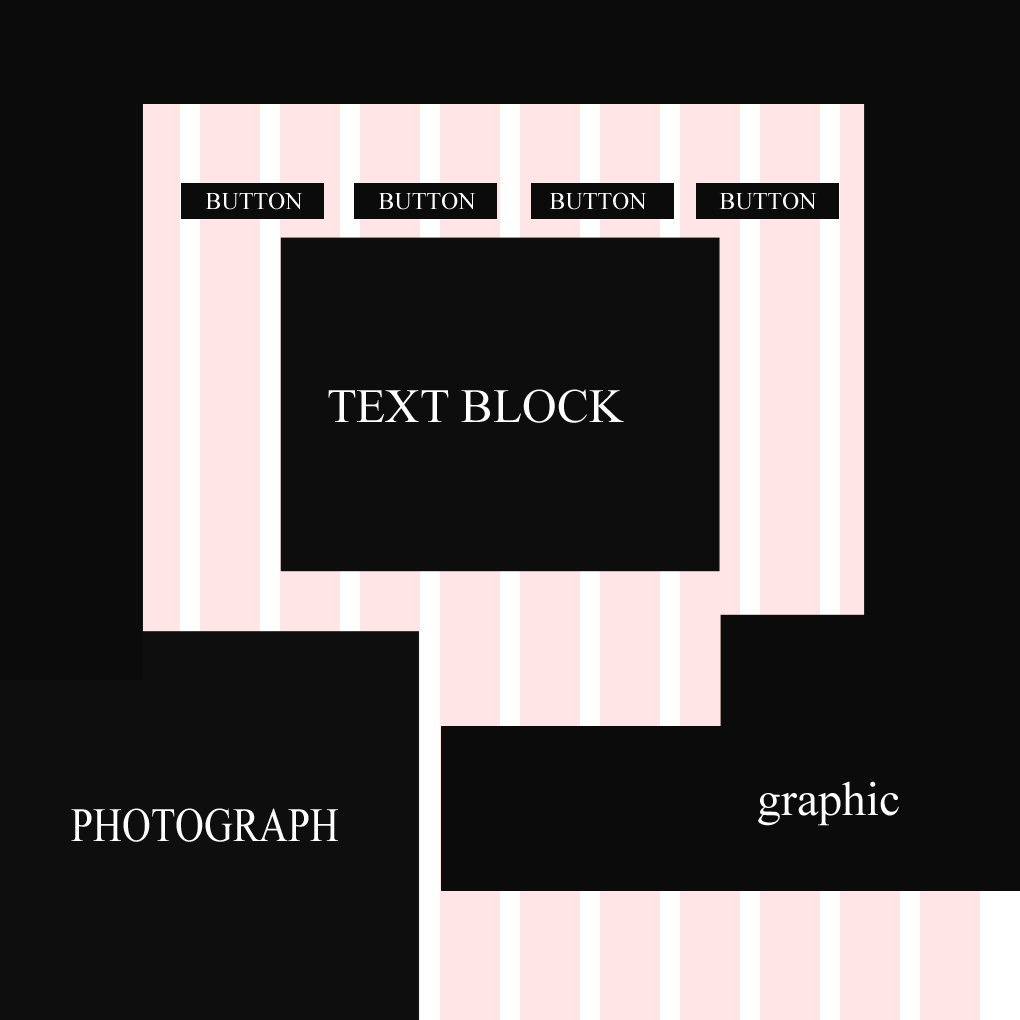
<style>
.page{position:relative;width:1020px;height:1020px;background:#0b0b0b}
.page>*{position:absolute;margin:0}
.t1{font:23.9px "TimesNewRomanPSMT";color:#ffffff}
.t2{font:47.8px "TimesNewRomanPSMT";color:#ffffff}
.t3{font:47.8px "TimesNewRomanPSMT";color:#ffffff;scale:0.83 1}
</style>
<div class="page">
<p class="t1" style="left:205px;top:192px;width:98px;height:18px">BUTTON</p>
<p class="t1" style="left:378px;top:192px;width:98px;height:18px">BUTTON</p>
<p class="t1" style="left:549px;top:192px;width:98px;height:18px">BUTTON</p>
<p class="t1" style="left:719px;top:192px;width:98px;height:18px">BUTTON</p>
<p class="t2" style="left:328px;top:389px;width:296px;height:34px">TEXT BLOCK</p>
<p class="t2" style="left:758px;top:781px;width:141px;height:45px">graphic</p>
<p class="t3" style="left:71px;top:808px;width:267px;height:34px">PHOTOGRAPH</p>
</div>
